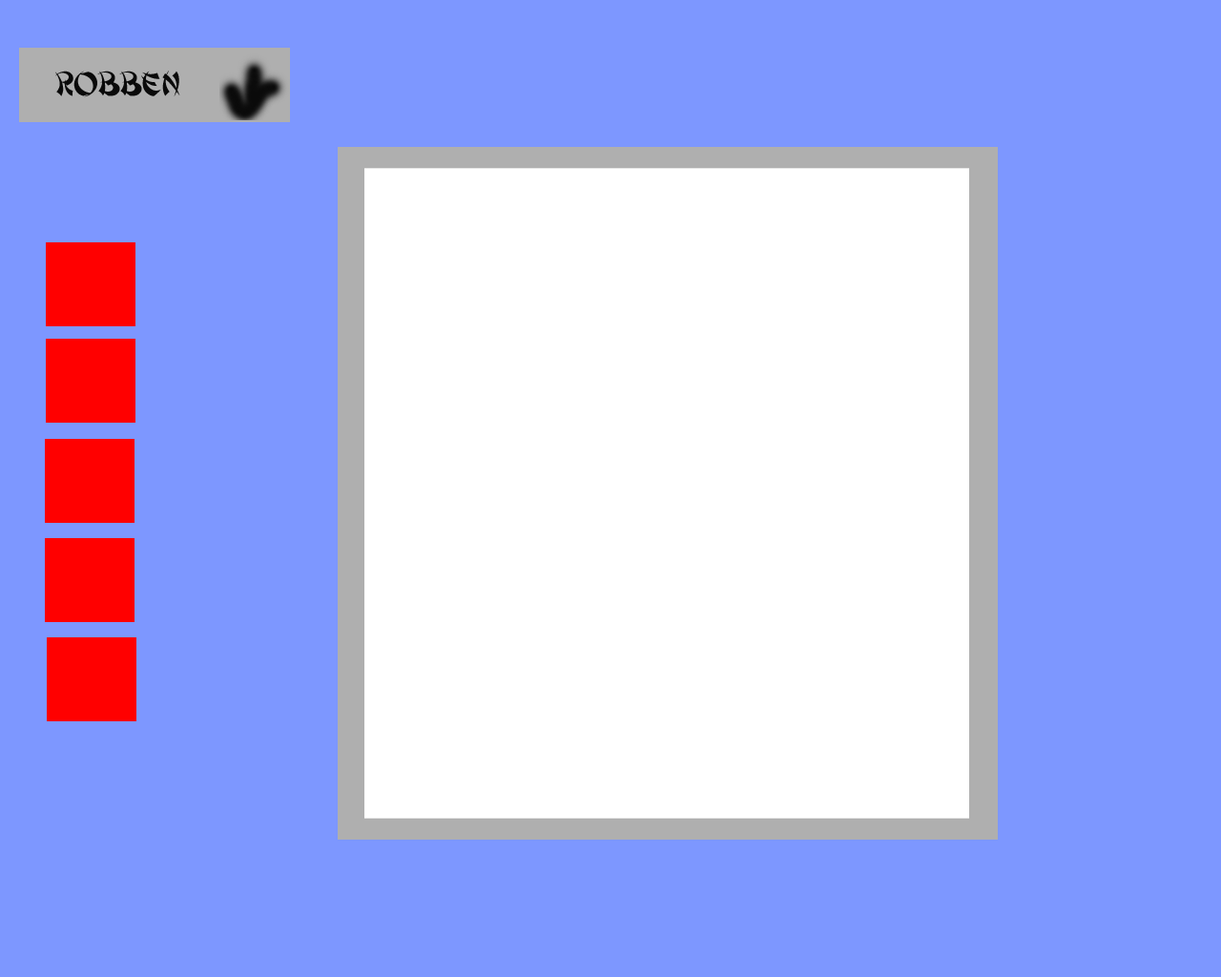
<style>
.page{position:relative;width:1221px;height:977px;background:#7d97ff}
.page>*{position:absolute;margin:0}
.t1{font:34.3px "Shanghai";color:#0a0a0a}
</style>
<div class="page">
<p class="t1" style="left:55px;top:71px;width:125px;height:26px">Robben</p>
</div>
